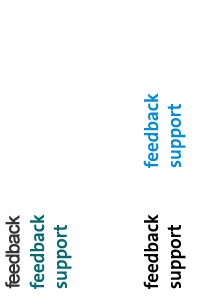
<style>
.page{position:relative;width:200px;height:300px;background:#ffffff}
.page>*{position:absolute;margin:0}
.t1{font:19px "GeoSans-SemiBold";color:#008cdc}
.t2{font:19px "GeoSans-SemiBold";color:#036b6f}
.t3{font:19px "GeoSans-SemiBold";color:#000000}
</style>
<div class="page">
<p class="t1" style="left:143px;top:93px;width:43px;height:75px;rotate:-90deg">feedback<br>support</p>
<p class="t2" style="left:29px;top:214px;width:43px;height:75px;rotate:-90deg">feedback<br>support</p>
<p class="t3" style="left:143px;top:214px;width:43px;height:75px;rotate:-90deg">feedback<br>support</p>
</div>
